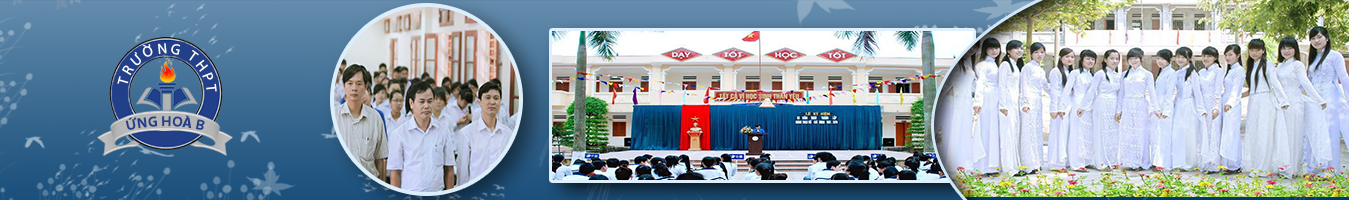
<style>
.page{position:relative;width:1349px;height:200px}
.page>*{position:absolute;margin:0}
.t1{font:14.6px "MyriadPro-Regular";letter-spacing:0.2em;color:#ffffff}
.t2{font:14.6px "MyriadPro-Bold";color:#224089}
</style>
<div class="page">
<p class="t1" style="left:117px;top:43px;width:100px;height:49px;rotate:92deg">TRƯỜNG THPT</p>
<p class="t2" style="left:125px;top:115px;width:80px;height:15px">ỨNG HOÀ B</p>
</div>
